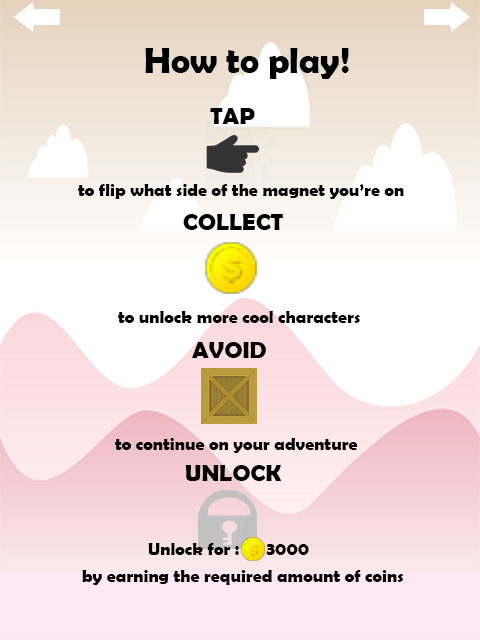
<style>
.page{position:relative;width:480px;height:640px}
.page>*{position:absolute;margin:0}
.t1{font:36px "BerlinSansFBDemi-Bold";color:#000000}
.t2{font:18px "BerlinSansFBDemi-Bold";color:#000000}
.t3{font:24px "BerlinSansFBDemi-Bold";color:#000000}
</style>
<div class="page">
<p class="t1" style="left:145px;top:48px;width:204px;height:31px">How to play!</p>
<p class="t2" style="left:78px;top:108px;width:326px;height:91px"><span class="t3">       TAP <br><br></span><br>to flip what side of the magnet you’re on</p>
<p class="t3" style="left:183px;top:214px;width:100px;height:16px">COLLECT</p>
<p class="t2" style="left:118px;top:311px;width:242px;height:12px">to unlock more cool characters</p>
<p class="t3" style="left:192px;top:342px;width:74px;height:16px">AVOID</p>
<p class="t2" style="left:115px;top:438px;width:243px;height:15px">to continue on your adventure</p>
<p class="t3" style="left:186px;top:465px;width:95px;height:16px">UNLOCK</p>
<p class="t2" style="left:148px;top:543px;width:161px;height:12px">Unlock for :      3000</p>
<p class="t2" style="left:82px;top:570px;width:322px;height:15px">by earning the required amount of coins</p>
</div>
